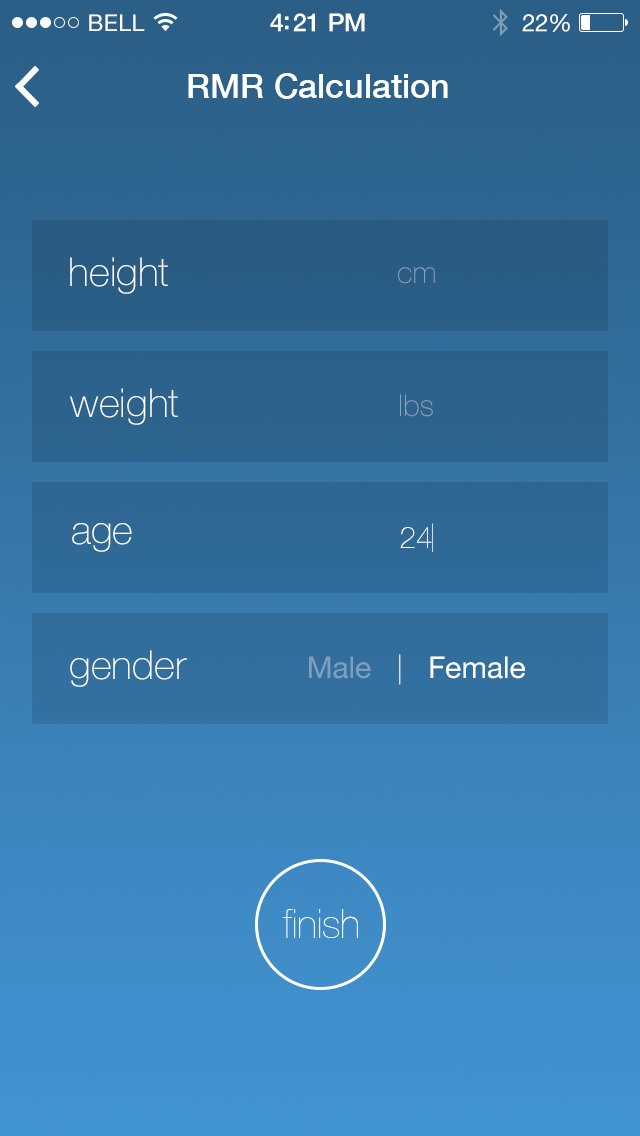
<style>
.page{position:relative;width:640px;height:1136px}
.page>*{position:absolute;margin:0}
.t1{font:23px "HelveticaNeue";letter-spacing:0.02em;color:#ffffff}
.t2{font:25px "HelveticaNeue-Medium";letter-spacing:-0.02em;color:#ffffff}
.t3{font:24px "HelveticaNeue";letter-spacing:-0.02em;color:#ffffff}
.t4{font:34px "HelveticaNeue-Medium";color:#ffffff}
.t5{font:40px "HelveticaNeue-Thin";color:#ffffff}
.t6{font:30px "HelveticaNeue-Thin";color:#8a9fb3}
.t7{font:30px "HelveticaNeue-Thin";color:#8ba2b8}
.t8{font:30px "HelveticaNeue-Thin";color:#ffffff}
.t9{font:40px "HelveticaNeue-UltraLight"}
.t10{font:30px "HelveticaNeue"}
.t11{font:30px "HelveticaNeue-Thin"}
.t12{font:40px "HelveticaNeue-UltraLight";color:#ffffff}
</style>
<div class="page">
<p class="t1" style="left:89px;top:14px;width:56px;height:17px">BELL</p>
<p class="t2" style="left:270px;top:13px;width:95px;height:19px">4:21 PM</p>
<p class="t3" style="left:522px;top:14px;width:48px;height:18px">22%</p>
<p class="t4" style="left:188px;top:73px;width:260px;height:26px">RMR Calculation</p>
<p class="t5" style="left:70px;top:257px;width:98px;height:37px">height</p>
<p class="t6" style="left:398px;top:267px;width:37px;height:17px">cm</p>
<p class="t5" style="left:70px;top:388px;width:108px;height:37px">weight</p>
<p class="t7" style="left:400px;top:394px;width:33px;height:23px">lbs</p>
<p class="t5" style="left:72px;top:523px;width:60px;height:29px">age</p>
<p class="t8" style="left:400px;top:527px;width:32px;height:21px">24</p>
<p class="t9" style="left:432px;top:523px;width:1px;height:29px">I</p>
<p class="t5" style="left:70px;top:650px;width:117px;height:37px">gender</p>
<p class="t10" style="left:309px;top:654px;width:216px;height:31px">Male<span class="t11">   |   </span>Female</p>
<p class="t12" style="left:282px;top:909px;width:76px;height:29px">finish</p>
</div>
